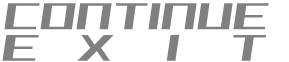
<style>
.page{position:relative;width:289px;height:62px;background:#ffffff}
.page>*{position:absolute;margin:0}
.t1{font:30px "MGS2BOLD";letter-spacing:0.19em;color:#808080;font-style:italic;scale:0.8 1}
.t2{font:29.8px "MGS2BOLD";letter-spacing:1.7em;color:#808080;font-style:italic;scale:0.84 1}
.t3{font:29.8px "MGS2BOLD";letter-spacing:2.28em;color:#808080;font-style:italic;scale:0.84 1}
.t4{font:29.8px "MGS2BOLD";letter-spacing:2.18em;color:#808080;font-style:italic;scale:0.84 1}
.t5{font:29.8px "MGS2BOLD";letter-spacing:1.98em;color:#808080;font-style:italic;scale:0.84 1}
</style>
<div class="page">
<p class="t1" style="left:4px;top:3px;width:265px;height:27px">CONTINUE</p>
<p class="t2" style="left:2px;top:35px;width:264px;height:26px">E<span class="t3">X</span><span class="t4">I</span><span class="t5">T</span></p>
</div>
